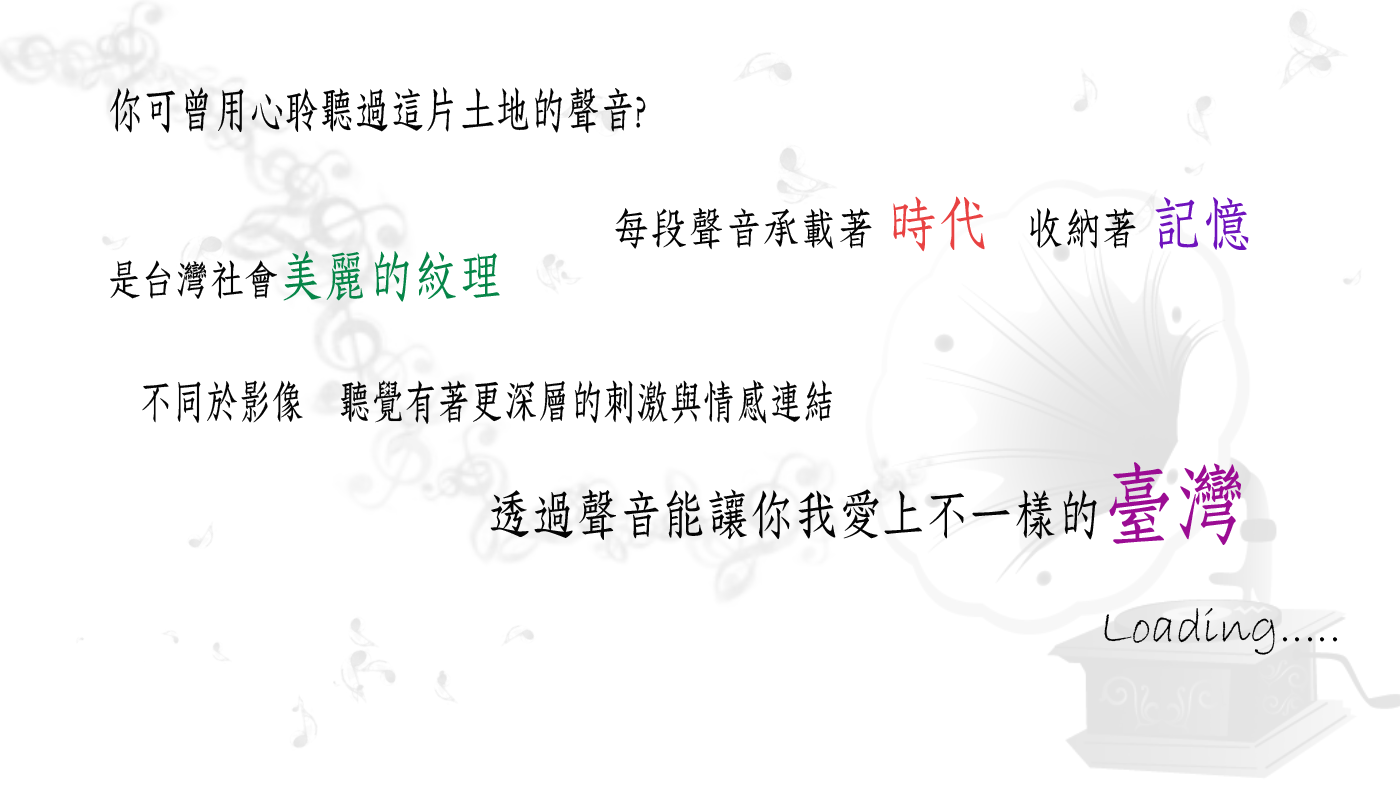
<style>
.page{position:relative;width:1400px;height:800px;background:#ffffff}
.page>*{position:absolute;margin:0}
.t1{font:47.4px "DFFangSong-W6-WINP-BF";color:#040404;scale:0.74 1}
.t2{font:42.9px "DFFangSong-W6-WINP-BF";color:#040404;scale:0.87 1}
.t3{font:58.3px "DFFangSong-W6-WINP-BF";color:#e84242;scale:0.87 1}
.t4{font:58.3px "DFFangSong-W6-WINP-BF";color:#6f13bd;scale:0.87 1}
.t5{font:41px "DFFangSong-W6-WINP-BF";color:#040404;scale:0.84 1}
.t6{font:53.8px "DFFangSong-W6-WINP-BF";color:#068548;scale:0.84 1}
.t7{font:45.1px "DFFangSong-W6-WINP-BF";color:#040404;scale:0.73 1}
.t8{font:52.4px "DFFangSong-W6-WINP-BF";color:#040404;scale:0.84 1}
.t9{font:88.5px "DFFangSong-W6-WINP-BF";color:#9b0c93;scale:0.84 1}
.t10{font:50px "BradleyHandITC";color:#000000}
</style>
<div class="page">
<p class="t1" style="left:110px;top:87px;width:536px;height:46px">你可曾用心聆聽過這片土地的聲音?</p>
<p class="t2" style="left:615px;top:196px;width:634px;height:56px">每段聲音承載著 <span class="t3">時代</span>   收納著 <span class="t4">記憶</span></p>
<p class="t5" style="left:110px;top:251px;width:390px;height:51px">是台灣社會<span class="t6">美麗的紋理</span></p>
<p class="t7" style="left:142px;top:380px;width:690px;height:44px">不同於影像   聽覺有著更深層的刺激與情感連結</p>
<p class="t8" style="left:490px;top:462px;width:751px;height:83px">透過聲音能讓你我愛上不一樣的<span class="t9">臺灣</span></p>
<p class="t10" style="left:1104px;top:608px;width:234px;height:47px">Loading.....</p>
</div>
